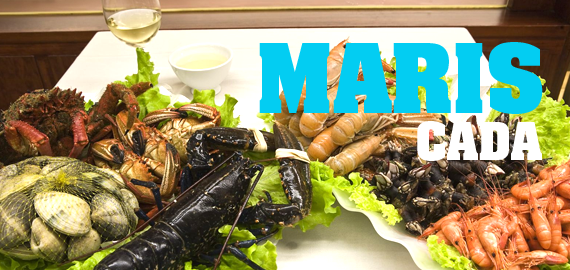
<style>
.page{position:relative;width:570px;height:270px}
.page>*{position:absolute;margin:0}
.t1{font:82px "AachenStd-Bold";letter-spacing:-0.005em;color:#03cdf2}
.t2{font:44px "AachenStd-Bold";color:#ffffff}
</style>
<div class="page">
<p class="t1" style="left:259px;top:42px;width:284px;height:72px">MARIS</p>
<p class="t2" style="left:417px;top:121px;width:125px;height:40px">CADA</p>
</div>
